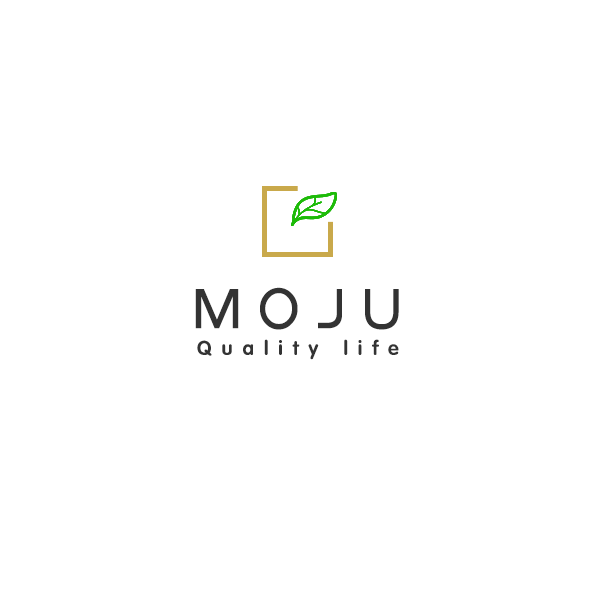
<style>
.page{position:relative;width:600px;height:600px;background:#ffffff}
.page>*{position:absolute;margin:0}
.t1{font:60px "BDZYJT--GB1-0";letter-spacing:0.3em;color:#333333}
.t2{font:20px "FZY4FW--GB1-0";letter-spacing:0.5em;color:#333333}
</style>
<div class="page">
<p class="t1" style="left:195px;top:287px;width:204px;height:43px">MOJU</p>
<p class="t2" style="left:197px;top:339px;width:202px;height:21px">Quality life</p>
</div>
